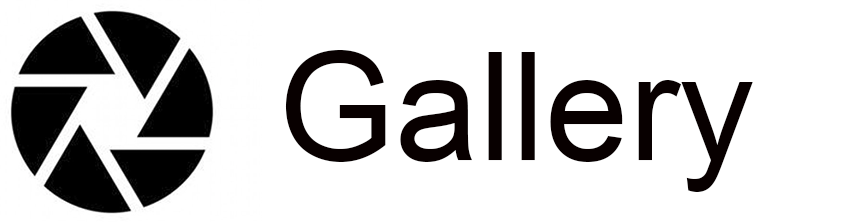
<style>
.page{position:relative;width:858px;height:222px;background:#ffffff}
.page>*{position:absolute;margin:0}
.t1{font:150px "ArialMT";color:#080000}
</style>
<div class="page">
<p class="t1" style="left:285px;top:50px;width:468px;height:142px">Gallery</p>
</div>
